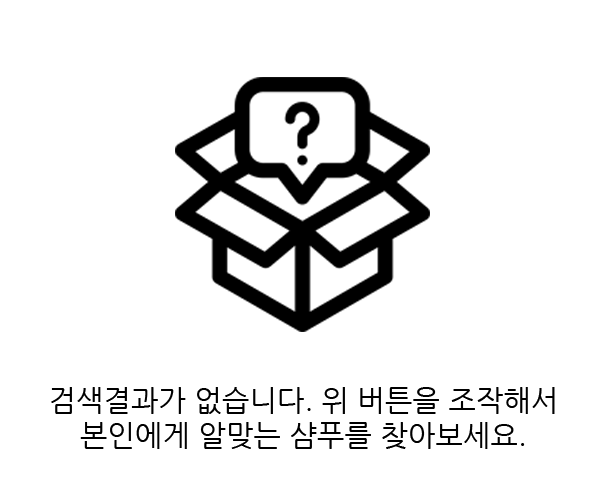
<style>
.page{position:relative;width:600px;height:500px;background:#ffffff}
.page>*{position:absolute;margin:0}
.t1{font:29.3px "NanumGothic";color:#000000}
</style>
<div class="page">
<p class="t1" style="left:51px;top:387px;width:504px;height:62px;text-align:center">검색결과가 없습니다. 위 버튼을 조작해서<br>본인에게 알맞는 샴푸를 찾아보세요.</p>
</div>
